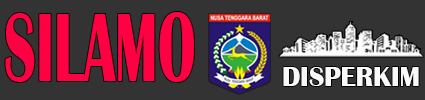
<style>
.page{position:relative;width:425px;height:100px;background:#333333}
.page>*{position:absolute;margin:0}
.t1{font:100.6px "BritannicBold";color:#ff0042;scale:0.58 1}
.t2{font:27.7px "BritannicBold";color:#f9f9f9}
</style>
<div class="page">
<p class="t1" style="left:5px;top:12px;width:189px;height:70px">SILAMO</p>
<p class="t2" style="left:283px;top:67px;width:136px;height:19px">DISPERKIM</p>
</div>
